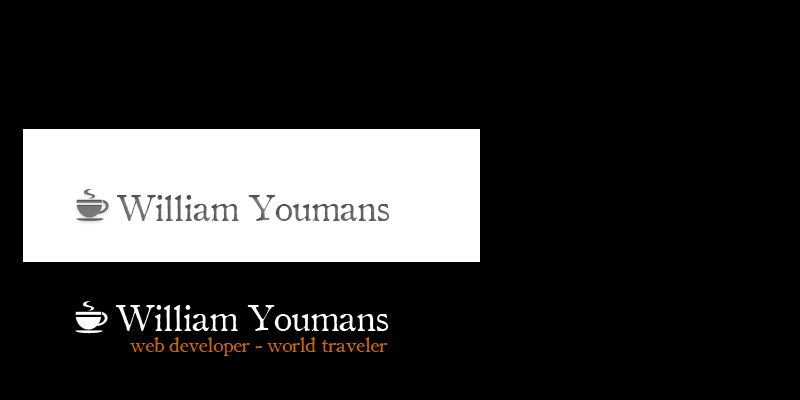
<style>
.page{position:relative;width:800px;height:400px;background:#000000}
.page>*{position:absolute;margin:0}
.t1{font:35px "OldStyle1HPLHS";letter-spacing:-0.005em;color:#616161}
.t2{font:35px "OldStyle1HPLHS";letter-spacing:-0.005em;color:#ffffff}
.t3{font:20px "OldStyle1HPLHS";letter-spacing:-0.005em;color:#cc6600}
</style>
<div class="page">
<p class="t1" style="left:116px;top:195px;width:274px;height:26px">William Youmans</p>
<p class="t2" style="left:115px;top:305px;width:274px;height:26px">William Youmans</p>
<p class="t3" style="left:130px;top:337px;width:258px;height:19px">web developer - world traveler</p>
</div>
